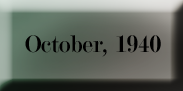
<style>
.page{position:relative;width:183px;height:91px}
.page>*{position:absolute;margin:0}
.t1{font:25.4px "Modern-Regular";color:#000000}
</style>
<div class="page">
<p class="t1" style="left:25px;top:35px;width:136px;height:22px">October, 1940</p>
</div>
